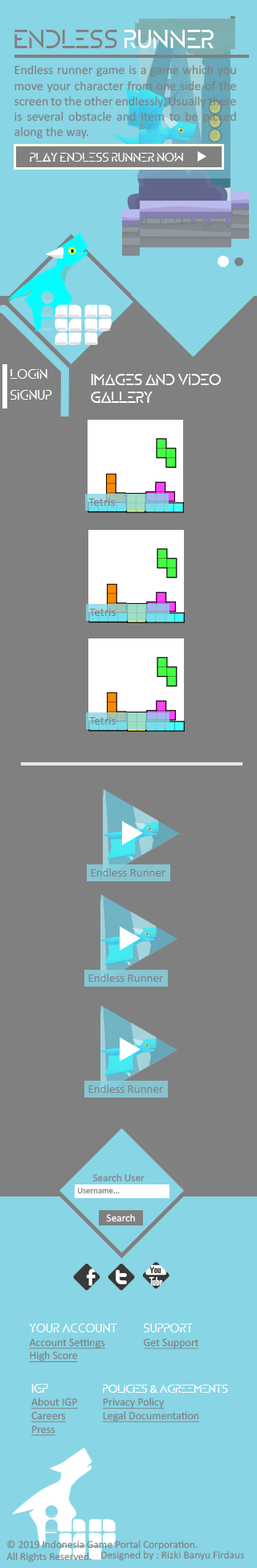
<style>
.page{position:relative;width:257px;height:1568px;background:#808080}
.page>*{position:absolute;margin:0}
.t1{font:25.7px "ZELDA";color:#808080}
.t2{font:25.7px "ZELDA";color:#ffffff}
.t3{font:12.8px "Calibri";color:#808080}
.t4{font:12.1px "ZELDA";color:#ffffff}
.t5{font:12.8px "ZELDA";color:#ffffff}
.t6{font:15px "ZELDA";color:#ffffff}
.t7{font:12.1px "Calibri";color:#808080}
.t8{font:10.7px "Calibri";color:#808080}
.t9{font:8.6px "Calibri";color:#808080}
.t10{font:10.7px "Calibri";color:#ffffff}
.t11{font:11.2px "Calibri";color:#808080;text-decoration:underline}
.t12{font:12.2px "ZELDA";color:#ffffff}
.t13{font:11.2px "ZELDA";color:#ffffff}
.t14{font:11.2px "Calibri";color:#ffffff}
</style>
<div class="page">
<p class="t1" style="left:14px;top:30px;width:200px;height:18px">Endless <span class="t2">Runner</span></p>
<p class="t3" style="left:14px;top:64px;width:222px;height:74px;text-align:justify">Endless runner game is a game which you move your character from one side of the screen to the other endlessly. Usually there is several obstacle and item to be picked along the way.</p>
<p class="t4" style="left:30px;top:153px;width:153px;height:9px">Play Endless Runner Now</p>
<p class="t5" style="left:10px;top:369px;width:37px;height:10px">Login</p>
<p class="t6" style="left:91px;top:374px;width:130px;height:29px;text-align:justify">Images and Video <br>Gallery</p>
<p class="t5" style="left:10px;top:390px;width:42px;height:10px">SignUp</p>
<p class="t7" style="left:88px;top:499px;width:27px;height:7px">Tetris</p>
<p class="t7" style="left:89px;top:609px;width:27px;height:7px">Tetris</p>
<p class="t7" style="left:89px;top:717px;width:27px;height:7px">Tetris</p>
<p class="t7" style="left:91px;top:868px;width:75px;height:8px">Endless Runner</p>
<p class="t7" style="left:88px;top:974px;width:75px;height:8px">Endless Runner</p>
<p class="t7" style="left:88px;top:1085px;width:75px;height:8px">Endless Runner</p>
<p class="t8" style="left:92px;top:1173px;width:53px;height:9px">Search User</p>
<p class="t9" style="left:78px;top:1188px;width:42px;height:6px">Username...</p>
<p class="t10" style="left:106px;top:1213px;width:29px;height:9px">Search</p>
<p class="t11" style="left:29px;top:1324px;width:88px;height:38px;text-align:justify"><span class="t12">Your Account<br></span>Account Settings<br>High Score</p>
<p class="t11" style="left:143px;top:1324px;width:56px;height:25px;text-align:justify"><span class="t12">Support<br></span>Get Support</p>
<p class="t11" style="left:31px;top:1384px;width:47px;height:52px;text-align:justify"><span class="t12">IGP<br></span>About IGP<br>Careers<br>Press</p>
<p class="t11" style="left:102px;top:1385px;width:126px;height:37px;text-align:justify"><span class="t13">Policies </span><span class="t14">&amp;</span><span class="t13"> Agreements<br></span>Privacy Policy<br>Legal Documentation</p>
<p class="t8" style="left:6px;top:1540px;width:192px;height:22px;text-align:justify">© 2019 Indonesia Game Portal Corporation. <br>All Rights Reserved.</p>
<p class="t8" style="left:101px;top:1550px;width:143px;height:11px">Designed by : Rizki Banyu Firdaus</p>
</div>
